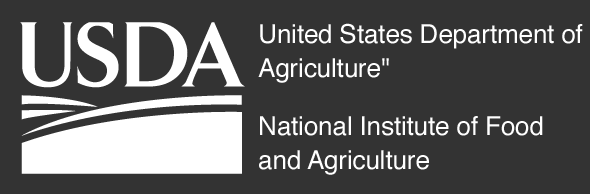
<style>
.page{position:relative;width:590px;height:194px;background:#333333}
.page>*{position:absolute;margin:0}
.t1{font:26px/34px "Helvetica";letter-spacing:-0.005em;color:#ffffff}
</style>
<div class="page">
<p class="t1" style="left:258px;top:23px;width:325px;height:152px">United States Department of Agriculture"<br>National Institute of Food and Agriculture</p>
</div>
